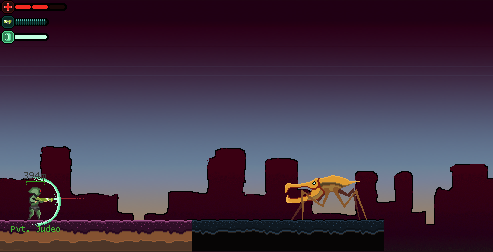
<style>
.page{position:relative;width:493px;height:252px}
.page>*{position:absolute;margin:0}
.t1{font:10px "LucidaConsole";color:#393c39}
.t2{font:9px "LucidaConsole";color:#44b631}
</style>
<div class="page">
<p class="t1" style="left:24px;top:172px;width:22px;height:7px">394m</p>
<p class="t2" style="left:11px;top:225px;width:49px;height:7px">Pvt. Judeo</p>
</div>
